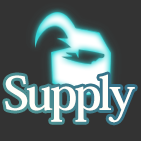
<style>
.page{position:relative;width:141px;height:141px;background:#333333}
.page>*{position:absolute;margin:0}
.t1{font:48px "HeiseiMinStd-W7";letter-spacing:-0.04em;color:#fffef9}
</style>
<div class="page">
<p class="t1" style="left:5px;top:74px;width:130px;height:49px">Supply</p>
</div>
